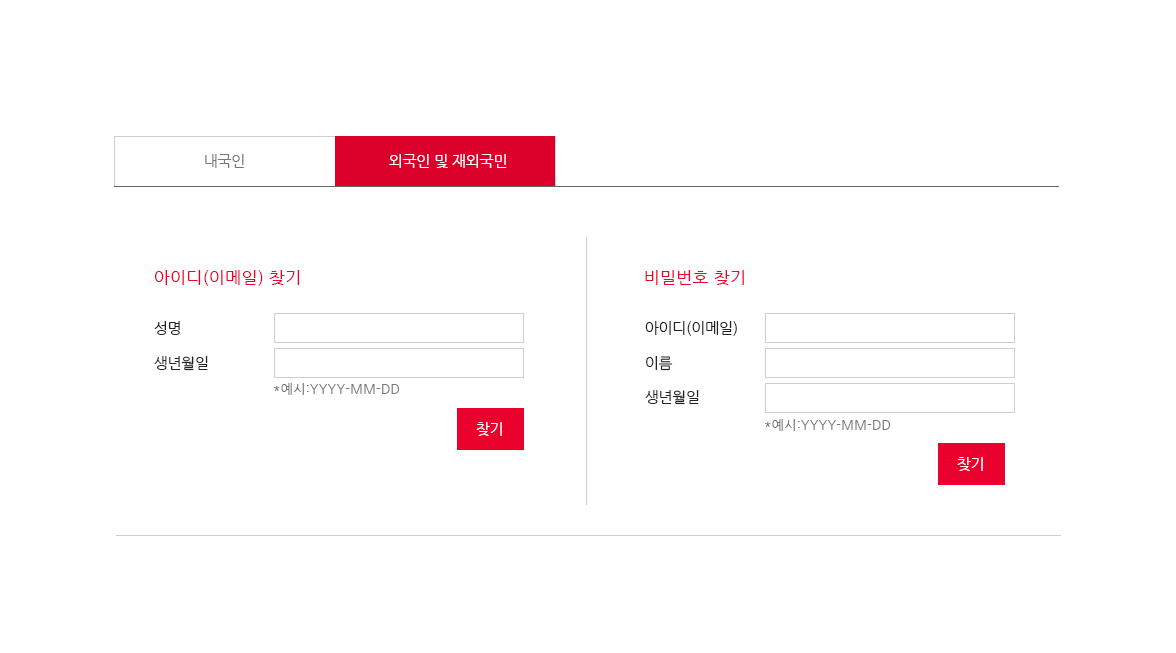
<style>
.page{position:relative;width:1176px;height:653px;background:#ffffff}
.page>*{position:absolute;margin:0}
.t1{font:14.7px "NanumGothic";color:#777777}
.t2{font:14.7px "NanumGothic";color:#ffffff}
.t3{font:17.3px "NanumGothic";color:#ed002c}
.t4{font:14.7px/34.7px "NanumGothic";color:#222222}
.t5{font:13.3px "NanumGothic";color:#777777}
</style>
<div class="page">
<p class="t1" style="left:205px;top:154px;width:39px;height:14px">내국인</p>
<p class="t2" style="left:389px;top:154px;width:118px;height:14px">외국인 및 재외국민</p>
<p class="t3" style="left:154px;top:270px;width:146px;height:16px">아이디(이메일) 찾기</p>
<p class="t3" style="left:645px;top:270px;width:99px;height:15px">비밀번호 찾기</p>
<p class="t4" style="left:154px;top:321px;width:54px;height:50px;text-align:justify">성명<br>생년월일</p>
<p class="t4" style="left:645px;top:321px;width:92px;height:84px;text-align:justify">아이디(이메일)<br>이름<br>생년월일</p>
<p class="t5" style="left:274px;top:383px;width:126px;height:12px">*예시:YYYY-MM-DD</p>
<p class="t2" style="left:476px;top:422px;width:26px;height:14px">찾기</p>
<p class="t5" style="left:765px;top:419px;width:126px;height:12px">*예시:YYYY-MM-DD</p>
<p class="t2" style="left:957px;top:457px;width:26px;height:14px">찾기</p>
</div>
